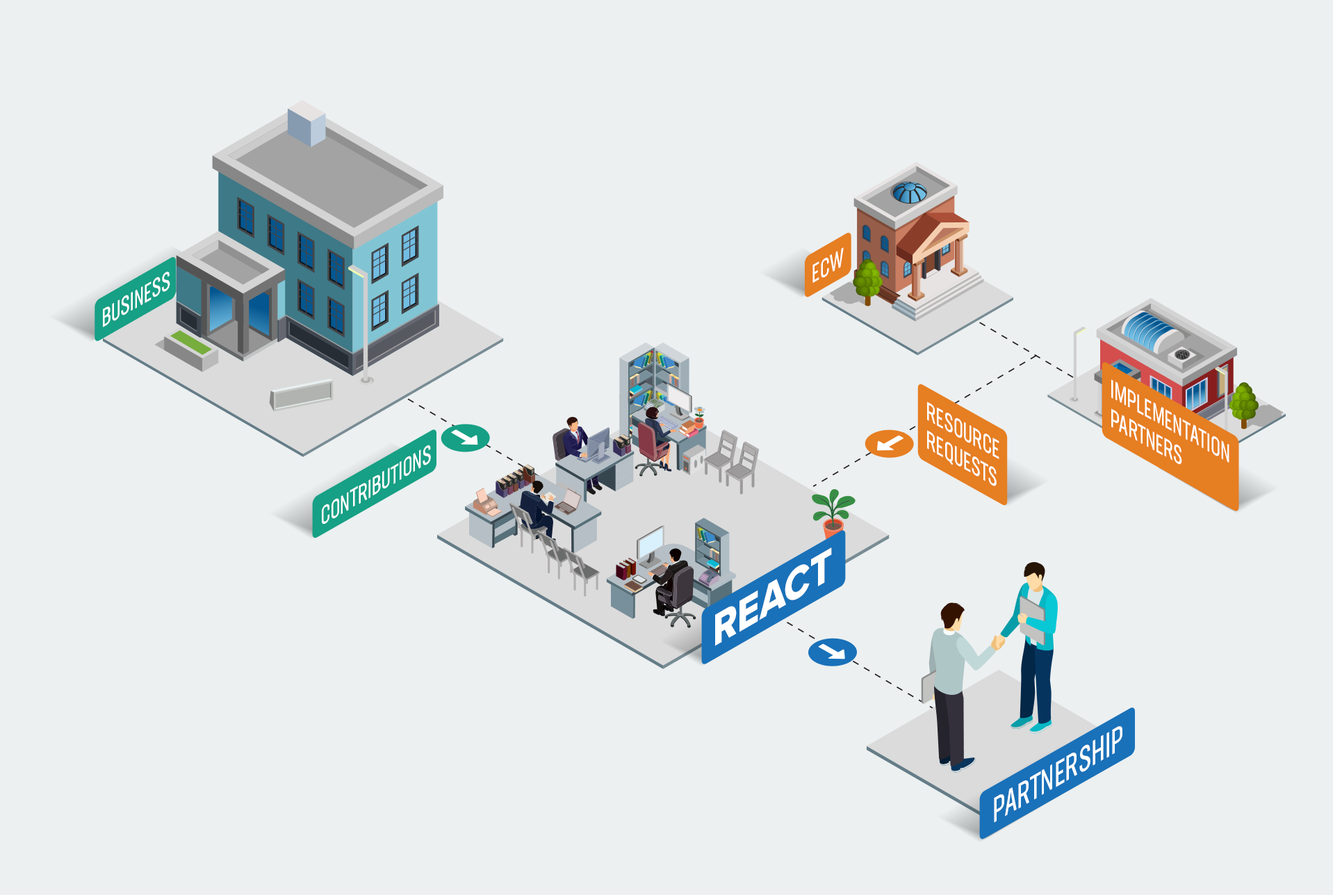
<style>
.page{position:relative;width:1333px;height:895px;background:#ecf0f1}
.page>*{position:absolute;margin:0}
.t1{font:25.5px "NeusaNextStd-CompactRegular";color:#ffffff;text-transform:uppercase;scale:0.93 1}
.t2{font:25.5px/28.9px "NeusaNextStd-CompactRegular";color:#ffffff;text-transform:uppercase;scale:0.92 1}
.t3{font:46.3px "ProximaNova-Extrabld";color:#ffffff;text-transform:uppercase;scale:0.93 1}
.t4{font:34.7px "NeusaNextStd-CompactRegular";color:#ffffff;text-transform:uppercase;scale:0.93 1}
</style>
<div class="page">
<p class="t1" style="left:812px;top:247px;width:31px;height:36px;rotate:-30deg">ECW</p>
<p class="t1" style="left:103px;top:272px;width:67px;height:55px;rotate:-30deg">Business</p>
<p class="t2" style="left:1111px;top:379px;width:118px;height:85px;rotate:29deg">Implementation<br>Partners</p>
<p class="t2" style="left:927px;top:402px;width:72px;height:84px;rotate:29deg">Resource<br>Requests</p>
<p class="t3" style="left:715px;top:547px;width:117px;height:99px;rotate:-30deg">REACT</p>
<p class="t4" style="left:994px;top:726px;width:128px;height:97px;rotate:-30deg">Partnership</p>
</div>
